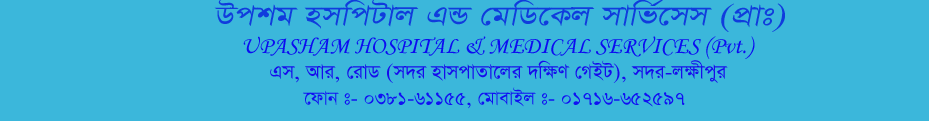
<style>
.page{position:relative;width:929px;height:121px;background:#3bb7db}
.page>*{position:absolute;margin:0}
.t1{font:34px "SutonnyMJ";color:#103cdd;scale:1.15 1}
.t2{font:36px "SutonnyMJ";color:#103cdd;scale:1.15 1}
.t3{font:24px "MonotypeCorsiva";color:#0c0cf1}
.t4{font:23px "SutonnyMJ";color:#160bed}
.t5{font:22px "SutonnyMJ";color:#1010f3}
</style>
<div class="page">
<p class="t1" style="left:214px;top:0px;width:571px;height:32px"><span class="t2">   </span>Dckg nmwcUvj GÛ †gwW‡Kj mvwf©‡mm (cÖvt)</p>
<p class="t3" style="left:243px;top:36px;width:512px;height:23px">UPASHAM HOSPITAL &amp; MEDICAL SERVICES (Pvt.)</p>
<p class="t4" style="left:270px;top:60px;width:458px;height:23px">Gm, Avi, †ivW (m`i nvmcvZv‡ji `wÿY †MBU), m`i-jÿxcyi</p>
<p class="t5" style="left:303px;top:87px;width:382px;height:22px">‡dvb t- 0381-61155, †gvevBj t- 01716-652597</p>
</div>
